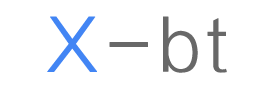
<style>
.page{position:relative;width:272px;height:92px;background:#ffffff}
.page>*{position:absolute;margin:0}
.t1{font:72px "FZLTXHK";letter-spacing:0.05em;color:#686868;font-weight:bold}
.t2{font:72px "FZLTXHK";letter-spacing:0.05em;color:#4285f4;font-weight:bold}
</style>
<div class="page">
<p class="t1" style="left:47px;top:16px;width:180px;height:57px"><span class="t2">X</span>-bt</p>
</div>
